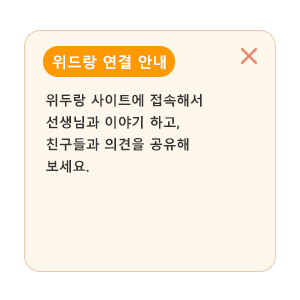
<style>
.page{position:relative;width:300px;height:300px;background:#fdf7eb}
.page>*{position:absolute;margin:0}
.t1{font:15px "MalgunGothicBold";color:#ffffff}
.t2{font:13.5px/22px "MalgunGothicBold";color:#333333}
</style>
<div class="page">
<p class="t1" style="left:52px;top:55px;width:114px;height:15px">위드랑 연결 안내</p>
<p class="t2" style="left:46px;top:94px;width:156px;height:79px">위두랑 사이트에 접속해서<br>선생님과 이야기 하고, <br>친구들과 의견을 공유해<br>보세요.</p>
</div>
